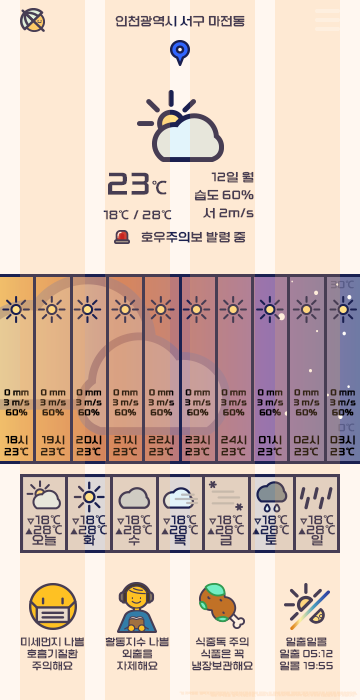
<style>
.page{position:relative;width:360px;height:700px;background:#fee9d3}
.page>*{position:absolute;margin:0}
.t1{font:12px "KIMM_Bold";color:#473d53}
.t2{font:30px "KIMM_Bold";color:#473d53}
.t3{font:18px "KIMM_Bold";color:#473d53}
.t4{font:12px/18px "KIMM_Bold";color:#473d53}
.t5{font:10px "KIMM_Bold"}
.t6{font:8px/10px "KIMM_Bold";font-weight:bold}
.t7{font:8px/10px "KIMM_Bold";color:#322313;font-weight:bold}
.t8{font:8px/10px "KIMM_Bold";color:#000000;font-weight:bold}
.t9{font:10px "KIMM_Bold";color:#585c87}
.t10{font:10px/12px "KIMM_Bold";color:#000000;font-weight:bold}
.t11{font:10px/12px "KIMM_Bold";color:#322313;font-weight:bold}
.t12{font:10px/12px "KIMM_Bold";font-weight:bold}
.t13{font:12px/10px "KIMM_Bold";color:#473d53}
.t14{font:8px/10px "KIMM_Bold";color:#473d53}
.t15{font:12px/10px "KIMM_Bold";color:#1a2151}
.t16{font:8px/10px "KIMM_Bold";color:#1a2151}
.t17{font:10px/12px "KIMM_Bold";color:#473d53}
.t18{font:3px/2px "KIMM_Bold";color:#fedfc0;font-weight:bold}
</style>
<div class="page">
<p class="t1" style="left:115px;top:15px;width:130px;height:12px">인천광역시 서구 마전동</p>
<p class="t2" style="left:108px;top:172px;width:59px;height:23px">23<span class="t3">℃</span></p>
<p class="t4" style="left:194px;top:171px;width:60px;height:48px;text-align:right">12일 월<br>습도 60%<br>서 2m/s</p>
<p class="t1" style="left:103px;top:209px;width:69px;height:11px">18℃ / 28℃</p>
<p class="t1" style="left:141px;top:231px;width:105px;height:12px">호우주의보 발령 중</p>
<p class="t5" style="left:330px;top:280px;width:24px;height:9px">30℃</p>
<p class="t6" style="left:3px;top:389px;width:27px;height:27px;text-align:center">0 mm<br>3 m/s<br>60%</p>
<p class="t7" style="left:40px;top:389px;width:26px;height:27px;text-align:center">0 mm<br>3 m/s<br>60%</p>
<p class="t6" style="left:76px;top:389px;width:26px;height:27px;text-align:center">0 mm<br>3 m/s<br>60%</p>
<p class="t7" style="left:112px;top:389px;width:27px;height:27px;text-align:center">0 mm<br>3 m/s<br>60%</p>
<p class="t7" style="left:148px;top:389px;width:27px;height:27px;text-align:center">0 mm<br>3 m/s<br>60%</p>
<p class="t7" style="left:185px;top:389px;width:26px;height:27px;text-align:center">0 mm<br>3 m/s<br>60%</p>
<p class="t7" style="left:221px;top:389px;width:26px;height:27px;text-align:center">0 mm<br>3 m/s<br>60%</p>
<p class="t8" style="left:257px;top:389px;width:27px;height:27px;text-align:center">0 mm<br>3 m/s<br>60%</p>
<p class="t7" style="left:293px;top:389px;width:27px;height:27px;text-align:center">0 mm<br>3 m/s<br>60%</p>
<p class="t8" style="left:330px;top:389px;width:26px;height:27px;text-align:center">0 mm<br>3 m/s<br>60%</p>
<p class="t9" style="left:338px;top:423px;width:17px;height:9px">0℃</p>
<p class="t10" style="left:4px;top:435px;width:25px;height:21px;text-align:center">18시<br>23℃</p>
<p class="t11" style="left:40px;top:435px;width:25px;height:21px;text-align:center">19시<br>23℃</p>
<p class="t12" style="left:76px;top:435px;width:26px;height:21px;text-align:center">20시<br>23℃</p>
<p class="t11" style="left:113px;top:435px;width:24px;height:21px;text-align:center">21시<br>23℃</p>
<p class="t11" style="left:148px;top:435px;width:26px;height:21px;text-align:center">22시<br>23℃</p>
<p class="t11" style="left:185px;top:435px;width:25px;height:21px;text-align:center">23시<br>23℃</p>
<p class="t11" style="left:221px;top:435px;width:26px;height:21px;text-align:center">24시<br>23℃</p>
<p class="t10" style="left:257px;top:435px;width:25px;height:21px;text-align:center">01시<br>23℃</p>
<p class="t11" style="left:293px;top:435px;width:27px;height:21px;text-align:center">02시<br>23℃</p>
<p class="t12" style="left:330px;top:435px;width:25px;height:21px;text-align:center">03시<br>23℃</p>
<p class="t13" style="left:25px;top:515px;width:37px;height:31px;text-align:center"><span class="t14">▽</span>18℃<br><span class="t14">▲</span>28℃<br>오늘</p>
<p class="t15" style="left:70px;top:515px;width:37px;height:31px;text-align:center"><span class="t16">▽</span>18℃<br><span class="t16">▲</span>28℃<br>화</p>
<p class="t13" style="left:115px;top:515px;width:37px;height:31px;text-align:center"><span class="t14">▽</span>18℃<br><span class="t14">▲</span>28℃<br>수</p>
<p class="t15" style="left:161px;top:515px;width:37px;height:31px;text-align:center"><span class="t16">▽</span>18℃<br><span class="t16">▲</span>28℃<br>목</p>
<p class="t13" style="left:207px;top:515px;width:37px;height:31px;text-align:center"><span class="t14">▽</span>18℃<br><span class="t14">▲</span>28℃<br>금</p>
<p class="t15" style="left:252px;top:515px;width:37px;height:30px;text-align:center"><span class="t16">▽</span>18℃<br><span class="t16">▲</span>28℃<br>토</p>
<p class="t13" style="left:298px;top:515px;width:37px;height:31px;text-align:center"><span class="t14">▽</span>18℃<br><span class="t14">▲</span>28℃<br>일</p>
<p class="t17" style="left:20px;top:637px;width:64px;height:34px;text-align:center">미세먼지 나쁨<br>호흡기질환<br>주의해요</p>
<p class="t17" style="left:105px;top:637px;width:64px;height:34px;text-align:center">활동지수 나쁨<br>외출을<br>자제해요</p>
<p class="t17" style="left:192px;top:637px;width:61px;height:34px;text-align:center">식중독 주의<br>식품은 꼭<br>냉장보관해요</p>
<p class="t17" style="left:279px;top:637px;width:54px;height:34px;text-align:center">일출일몰<br>일출 05:12<br>일몰 19:55</p>
<p class="t18" style="left:179px;top:691px;width:179px;height:6px;text-align:right">"본 저작물은 '한국기계연구원'에서 '2022년'작성하여 공공누리 제1유형으로 개방한 '한국기계연구원 서체'를 이용하였으며,<br>해당 저작물은 '한국기계연구원, www.kimm.re.kr/webfont'에서 무료로 다운받으실 수 있습니다."</p>
</div>
